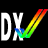
<style>
.page{position:relative;width:48px;height:48px;background:#000000}
.page>*{position:absolute;margin:0}
.t1{font:37.5px "Verdana-Bold";letter-spacing:0.05em;color:#ffffff;text-transform:uppercase;font-weight:bold;scale:0.36 1}
</style>
<div class="page">
<p class="t1" style="left:1px;top:12px;width:23px;height:29px">DX</p>
</div>
